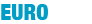
<style>
.page{position:relative;width:92px;height:24px;background:#ffffff}
.page>*{position:absolute;margin:0}
.t1{font:22px "HelveticaNeue-CondensedBlack";color:#009dc7}
.t2{font:22px "HelveticaNeue-CondensedBlack";color:#ffffff}
</style>
<div class="page">
<p class="t1" style="left:1px;top:4px;width:92px;height:16px">EURO<span class="t2">POLY</span></p>
</div>
